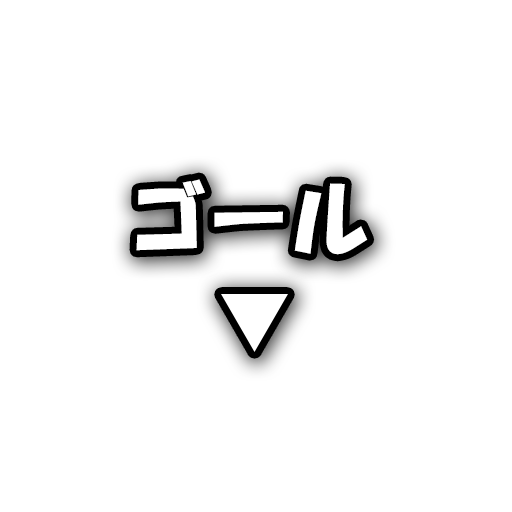
<style>
.page{position:relative;width:512px;height:512px;background:#ffffff}
.page>*{position:absolute;margin:0}
.t1{font:81.9px "HGSSoeiKakupoptai";color:#ffffff}
</style>
<div class="page">
<p class="t1" style="left:136px;top:179px;width:232px;height:76px">ゴール</p>
</div>
